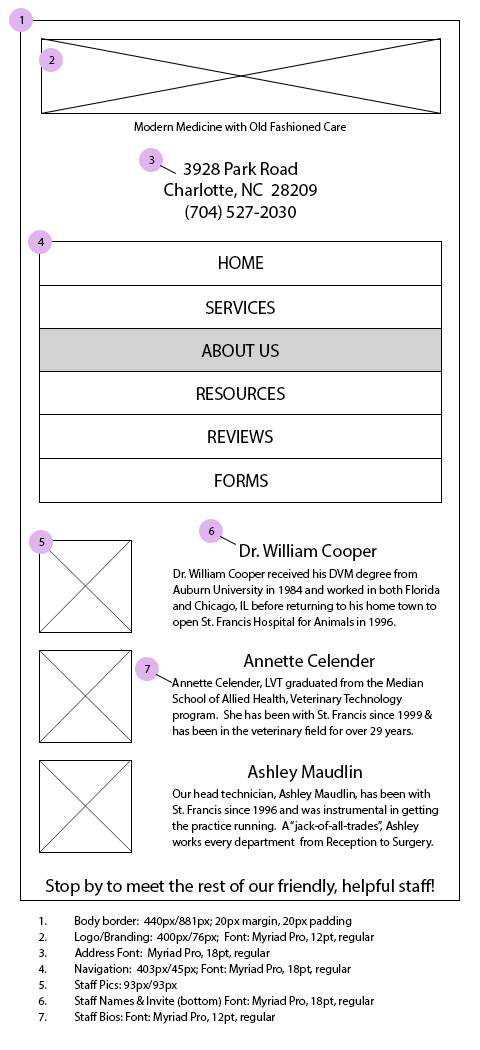
<style>
.page{position:relative;width:480px;height:1050px;background:#ffffff}
.page>*{position:absolute;margin:0}
.t1{font:12px "MyriadPro-Regular";color:#000000}
.t2{font:18px "MyriadPro-Regular";color:#000000}
.t3{font:12px/16px "MyriadPro-Regular";color:#000000}
</style>
<div class="page">
<p class="t1" style="left:20px;top:16px;width:3px;height:8px">1</p>
<p class="t1" style="left:49px;top:56px;width:6px;height:8px">2</p>
<p class="t1" style="left:134px;top:122px;width:212px;height:9px">Modern Medicine with Old Fashioned Care</p>
<p class="t1" style="left:149px;top:156px;width:6px;height:8px">3</p>
<p class="t2" style="left:164px;top:162px;width:153px;height:58px;text-align:center">3928 Park Road<br>Charlotte, NC  28209<br>(704) 527-2030</p>
<p class="t1" style="left:37px;top:238px;width:8px;height:8px">4</p>
<p class="t2" style="left:219px;top:256px;width:45px;height:13px">HOME</p>
<p class="t2" style="left:206px;top:301px;width:69px;height:13px">SERVICES</p>
<p class="t2" style="left:201px;top:344px;width:78px;height:13px">ABOUT US</p>
<p class="t2" style="left:197px;top:387px;width:88px;height:13px">RESOURCES</p>
<p class="t2" style="left:208px;top:430px;width:65px;height:13px">REVIEWS</p>
<p class="t2" style="left:215px;top:474px;width:53px;height:13px">FORMS</p>
<p class="t1" style="left:209px;top:527px;width:6px;height:8px">6</p>
<p class="t1" style="left:39px;top:538px;width:6px;height:8px">5</p>
<p class="t2" style="left:240px;top:544px;width:137px;height:17px">Dr. William Cooper</p>
<p class="t3" style="left:173px;top:569px;width:267px;height:60px">Dr. William Cooper received his DVM degree from<br>Auburn University in 1984 and worked in both Florida <br>and Chicago, IL before returning to his home town to <br>open St. Francis Hospital for Animals in 1996.</p>
<p class="t2" style="left:243px;top:654px;width:132px;height:13px">Annette Celender</p>
<p class="t1" style="left:145px;top:665px;width:6px;height:8px">7</p>
<p class="t3" style="left:172px;top:678px;width:260px;height:60px">Annette Celender, LVT graduated from the Median <br>School of Allied Health, Veterinary Technology<br>program.  She has been with St. Francis since 1999 &amp;<br>has been in the veterinary field for over 29 years.</p>
<p class="t2" style="left:247px;top:765px;width:115px;height:17px">Ashley Maudlin</p>
<p class="t3" style="left:172px;top:789px;width:266px;height:60px">Our head technician, Ashley Maudlin, has been with <br>St. Francis since 1996 and was instrumental in getting<br>the practice running.  A “jack-of-all-trades”, Ashley <br>works every department  from Reception to Surgery.</p>
<p class="t2" style="left:46px;top:879px;width:388px;height:17px">Stop by to meet the rest of our friendly, helpful staff!</p>
<p class="t3" style="left:38px;top:916px;width:337px;height:108px">1. Body border:  440px/881px; 20px margin, 20px padding<br>2. Logo/Branding:  400px/76px;  Font: Myriad Pro, 12pt, regular<br>3. Address Font:  Myriad Pro, 18pt, regular<br>4. Navigation:  403px/45px; Font: Myriad Pro, 18pt, regular<br>5. Staff Pics: 93px/93px<br>6. Staff Names &amp; Invite (bottom) Font: Myriad Pro, 18pt, regular<br>7. Staff Bios: Font: Myriad Pro, 12pt, regular</p>
</div>
